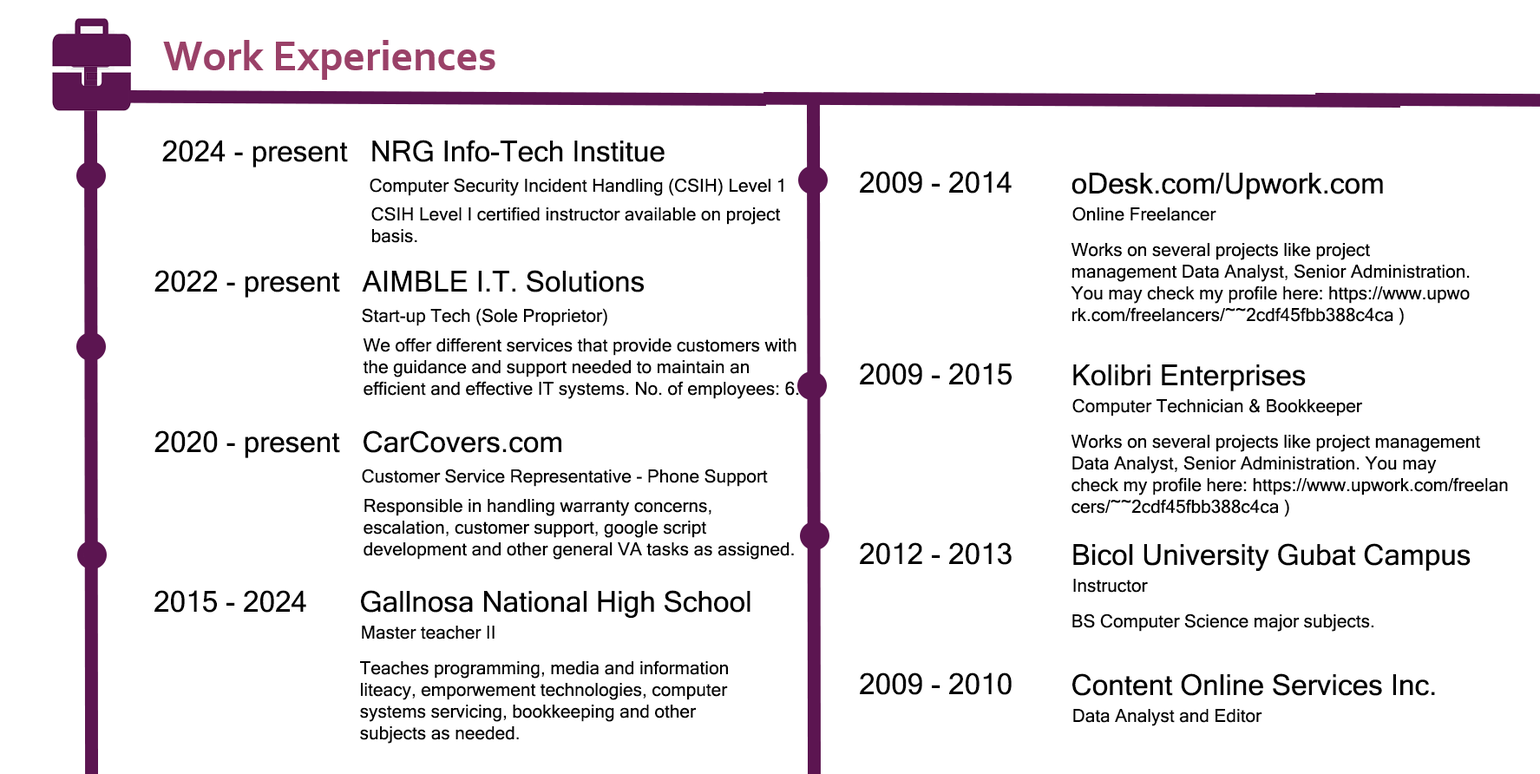
<style>
.page{position:relative;width:1540px;height:774px;background:#ffffff}
.page>*{position:absolute;margin:0}
.t1{font:28.9px "MicrosoftSansSerif";color:#000000}
.t2{font:18.1px "MicrosoftSansSerif";color:#000000}
</style>
<div class="page">
<p class="t1" style="left:162px;top:140px;width:186px;height:27px">2024 - present</p>
<p class="t1" style="left:372px;top:140px;width:293px;height:22px">NRG Info-Tech Institue</p>
<p class="t1" style="left:860px;top:171px;width:152px;height:23px">2009 - 2014</p>
<p class="t1" style="left:1072px;top:173px;width:311px;height:27px">oDesk.com/Upwork.com</p>
<p class="t2" style="left:370px;top:178px;width:414px;height:18px">Computer Security Incident Handling (CSIH) Level 1</p>
<p class="t2" style="left:371px;top:207px;width:410px;height:36px">CSIH Level I certified instructor available on project<br>basis.</p>
<p class="t2" style="left:1073px;top:207px;width:144px;height:14px">Online Freelancer</p>
<p class="t2" style="left:1071px;top:243px;width:399px;height:82px">Works on several projects like project <br>management Data Analyst, Senior Administration.<br>You may check my profile here: https://www.upwo<br>rk.com/freelancers/~~2cdf45fbb388c4ca )</p>
<p class="t1" style="left:154px;top:270px;width:186px;height:28px">2022 - present</p>
<p class="t1" style="left:362px;top:270px;width:282px;height:22px">AIMBLE I.T. Solutions</p>
<p class="t2" style="left:362px;top:308px;width:245px;height:18px">Start-up Tech (Sole Proprietor)</p>
<p class="t2" style="left:363px;top:338px;width:436px;height:61px">We offer different services that provide customers with <br>the guidance and support needed to maintain an <br>efficient and effective IT systems. No. of employees: 6.</p>
<p class="t1" style="left:860px;top:363px;width:152px;height:22px">2009 - 2015</p>
<p class="t1" style="left:1074px;top:364px;width:232px;height:27px">Kolibri Enterprises</p>
<p class="t2" style="left:1073px;top:398px;width:289px;height:19px">Computer Technician &amp; Bookkeeper</p>
<p class="t1" style="left:154px;top:430px;width:186px;height:28px">2020 - present</p>
<p class="t1" style="left:364px;top:430px;width:197px;height:23px">CarCovers.com</p>
<p class="t2" style="left:1071px;top:435px;width:437px;height:82px">Works on several projects like project management<br>Data Analyst, Senior Administration. You may <br>check my profile here: https://www.upwork.com/freelan<br>cers/~~2cdf45fbb388c4ca )</p>
<p class="t2" style="left:362px;top:469px;width:406px;height:18px">Customer Service Representative - Phone Support</p>
<p class="t2" style="left:364px;top:499px;width:430px;height:61px">Responsible in handling warranty concerns, <br>escalation, customer support, google script <br>development and other general VA tasks as assigned.</p>
<p class="t1" style="left:860px;top:542px;width:152px;height:23px">2012 - 2013</p>
<p class="t1" style="left:1074px;top:543px;width:397px;height:28px">Bicol University Gubat Campus</p>
<p class="t2" style="left:1074px;top:579px;width:74px;height:14px">Instructor</p>
<p class="t1" style="left:154px;top:590px;width:152px;height:23px">2015 - 2024</p>
<p class="t1" style="left:361px;top:590px;width:390px;height:28px">Gallnosa National High School</p>
<p class="t2" style="left:1073px;top:614px;width:301px;height:18px">BS Computer Science major subjects.</p>
<p class="t2" style="left:362px;top:626px;width:133px;height:14px">Master teacher II</p>
<p class="t2" style="left:360px;top:660px;width:368px;height:84px">Teaches programming, media and information <br>liteacy, emporwement technologies, computer<br>systems servicing, bookkeeping and other <br>subjects as needed.</p>
<p class="t1" style="left:860px;top:673px;width:152px;height:22px">2009 - 2010</p>
<p class="t1" style="left:1073px;top:673px;width:362px;height:23px">Content Online Services Inc.</p>
<p class="t2" style="left:1074px;top:709px;width:189px;height:17px">Data Analyst and Editor</p>
</div>
